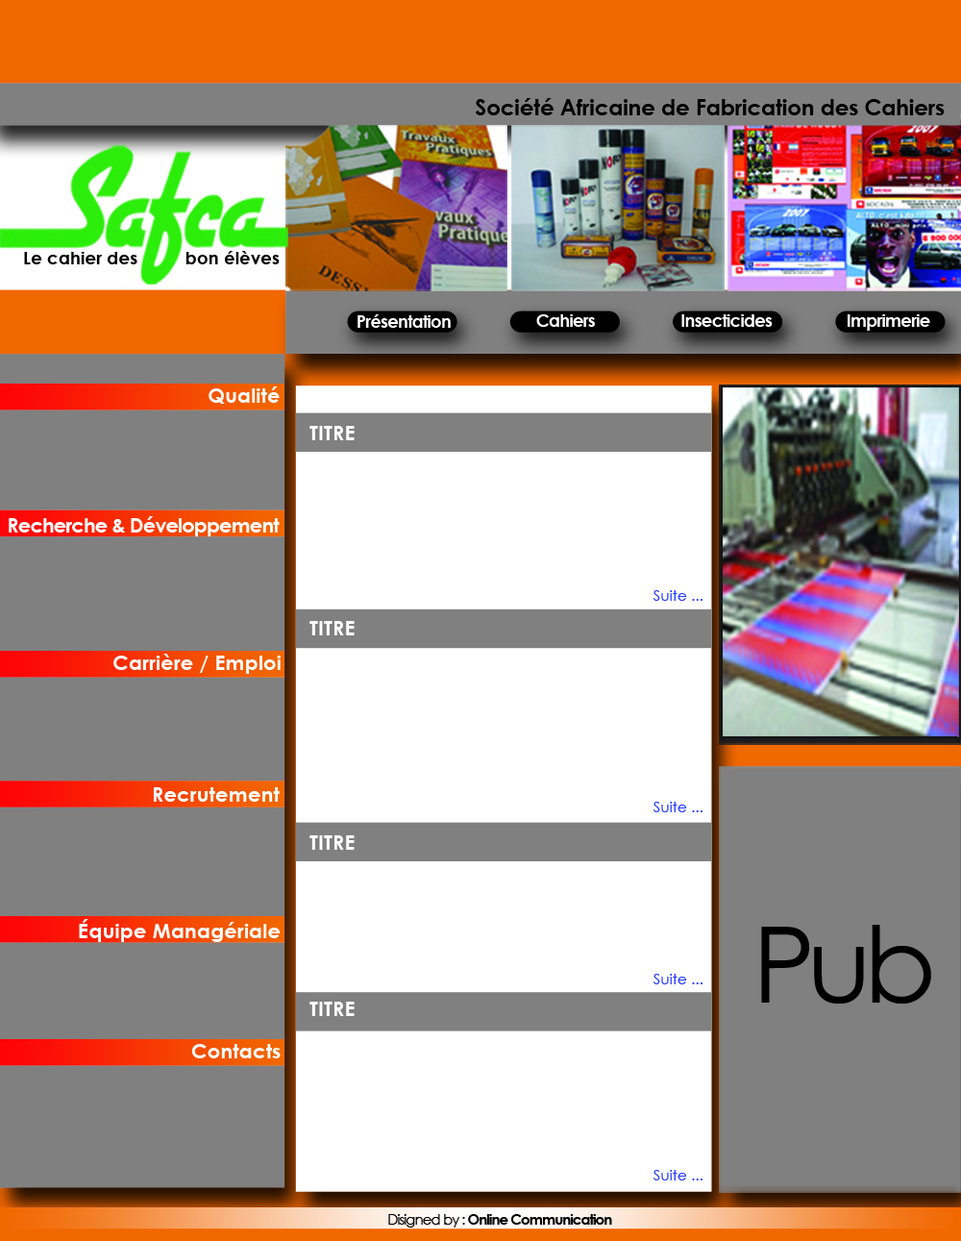
<style>
.page{position:relative;width:961px;height:1241px;background:#808080}
.page>*{position:absolute;margin:0}
.t1{font:21.8px "CenturyGothic-Bold";color:#000000}
.t2{font:17.7px "CenturyGothic-Bold";color:#000000}
.t3{font:17.7px "CenturyGothic-Bold";letter-spacing:-0.05em;color:#ffffff}
.t4{font:20.6px "CenturyGothic-Bold";color:#ffffff}
.t5{font:20.6px "CenturyGothic-Bold";letter-spacing:-0.05em;color:#ffffff}
.t6{font:14.7px "CenturyGothic";color:#263bff}
.t7{font:106.1px "CenturyGothic";letter-spacing:-0.075em;color:#000000}
.t8{font:14.7px "CenturyGothic-Bold";letter-spacing:-0.075em;color:#000000}
.t9{font:14.7px "CenturyGothic";letter-spacing:-0.075em;color:#000000}
</style>
<div class="page">
<p class="t1" style="left:475px;top:98px;width:470px;height:17px">Société Africaine de Fabrication des Cahiers</p>
<p class="t2" style="left:24px;top:252px;width:113px;height:12px">Le cahier des</p>
<p class="t2" style="left:185px;top:251px;width:95px;height:13px">bon élèves</p>
<p class="t3" style="left:358px;top:314px;width:93px;height:14px">Présentation</p>
<p class="t3" style="left:536px;top:314px;width:59px;height:13px">Cahiers</p>
<p class="t3" style="left:681px;top:314px;width:92px;height:13px">Insecticides</p>
<p class="t3" style="left:848px;top:314px;width:82px;height:17px">Imprimerie</p>
<p class="t4" style="left:209px;top:386px;width:71px;height:18px">Qualité</p>
<p class="t4" style="left:309px;top:426px;width:46px;height:14px">TITRE</p>
<p class="t5" style="left:9px;top:516px;width:271px;height:20px">Recherche &amp; Développement</p>
<p class="t6" style="left:653px;top:590px;width:50px;height:11px">Suite ...</p>
<p class="t4" style="left:309px;top:621px;width:46px;height:14px">TITRE</p>
<p class="t4" style="left:113px;top:654px;width:168px;height:20px">Carrière / Emploi</p>
<p class="t4" style="left:154px;top:787px;width:126px;height:15px">Recrutement</p>
<p class="t6" style="left:653px;top:802px;width:50px;height:10px">Suite ...</p>
<p class="t4" style="left:309px;top:835px;width:46px;height:15px">TITRE</p>
<p class="t4" style="left:79px;top:919px;width:202px;height:23px">Équipe Managériale</p>
<p class="t7" style="left:761px;top:925px;width:170px;height:78px">Pub</p>
<p class="t6" style="left:653px;top:974px;width:50px;height:10px">Suite ...</p>
<p class="t4" style="left:309px;top:1001px;width:46px;height:15px">TITRE</p>
<p class="t4" style="left:192px;top:1044px;width:89px;height:14px">Contacts</p>
<p class="t6" style="left:653px;top:1170px;width:50px;height:10px">Suite ...</p>
<p class="t8" style="left:388px;top:1214px;width:224px;height:13px"><span class="t9">Disigned by : </span>Online Communication</p>
</div>
